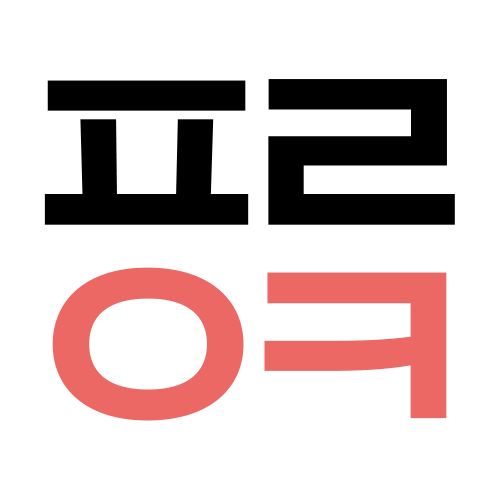
<style>
.page{position:relative;width:500px;height:500px;background:#ffffff}
.page>*{position:absolute;margin:0}
.t1{font:291.7px "NanumBarunGothicOTFBold";letter-spacing:-0.16em;color:#000000}
.t2{font:291.7px "NanumBarunGothicOTFBold";letter-spacing:-0.16em;color:#eb6864}
</style>
<div class="page">
<p class="t1" style="left:44px;top:79px;width:411px;height:146px">ㅍㄹ</p>
<p class="t2" style="left:52px;top:267px;width:395px;height:154px">ㅇㅋ</p>
</div>
